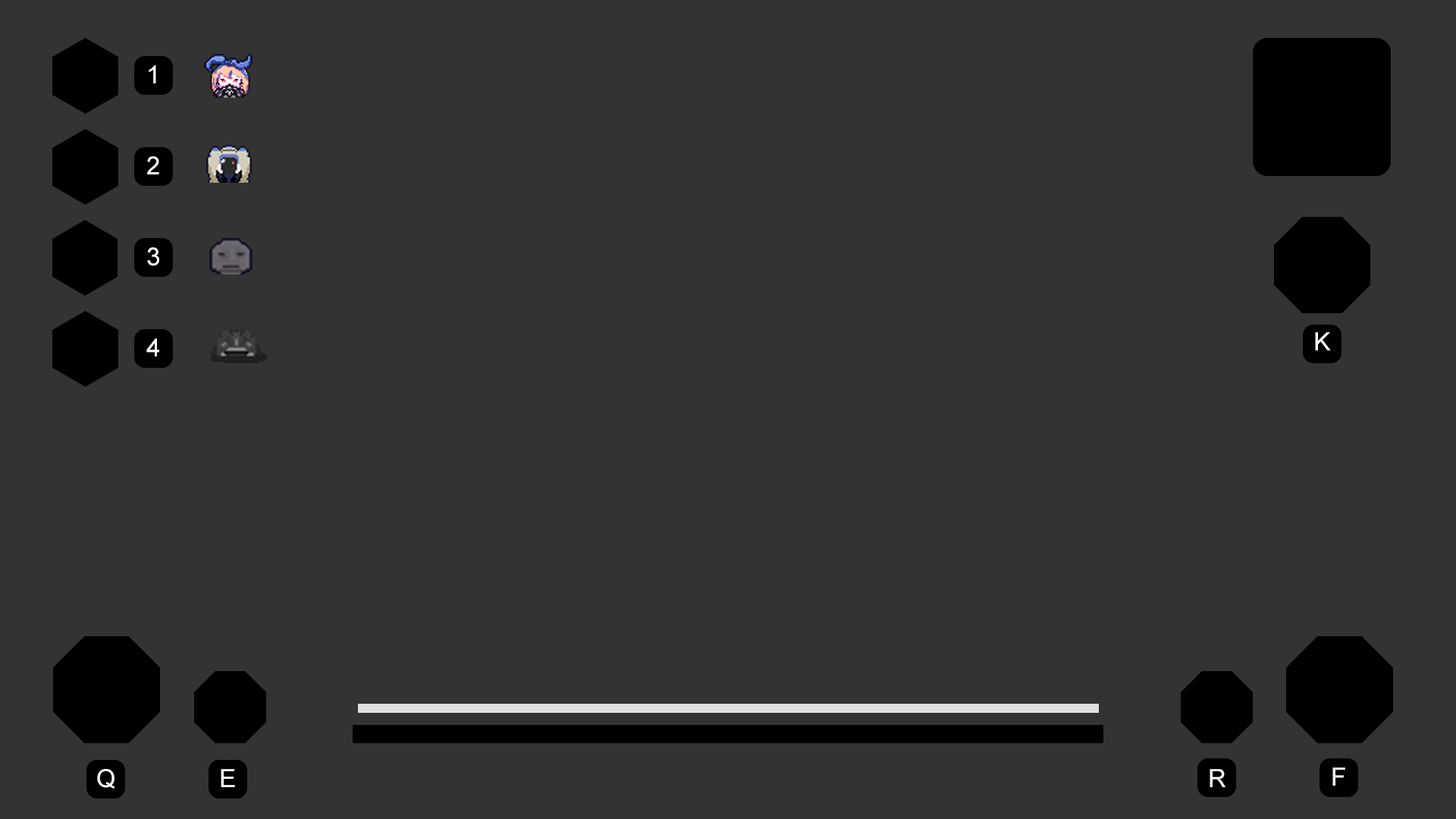
<style>
.page{position:relative;width:1456px;height:819px;background:#333333}
.page>*{position:absolute;margin:0}
.t1{font:25.3px "ArialMT";color:#ffffff}
.t2{font:25.2px "ArialMT";color:#ffffff}
</style>
<div class="page">
<p class="t1" style="left:149px;top:65px;width:7px;height:18px">1</p>
<p class="t2" style="left:147px;top:156px;width:12px;height:18px">2</p>
<p class="t1" style="left:147px;top:247px;width:12px;height:19px">3</p>
<p class="t2" style="left:146px;top:338px;width:13px;height:18px">4</p>
<p class="t2" style="left:1315px;top:332px;width:16px;height:18px">K</p>
<p class="t2" style="left:97px;top:769px;width:18px;height:20px">Q</p>
<p class="t2" style="left:221px;top:769px;width:14px;height:18px">E</p>
<p class="t2" style="left:1210px;top:769px;width:15px;height:18px">R</p>
<p class="t2" style="left:1332px;top:767px;width:13px;height:19px">F</p>
</div>
